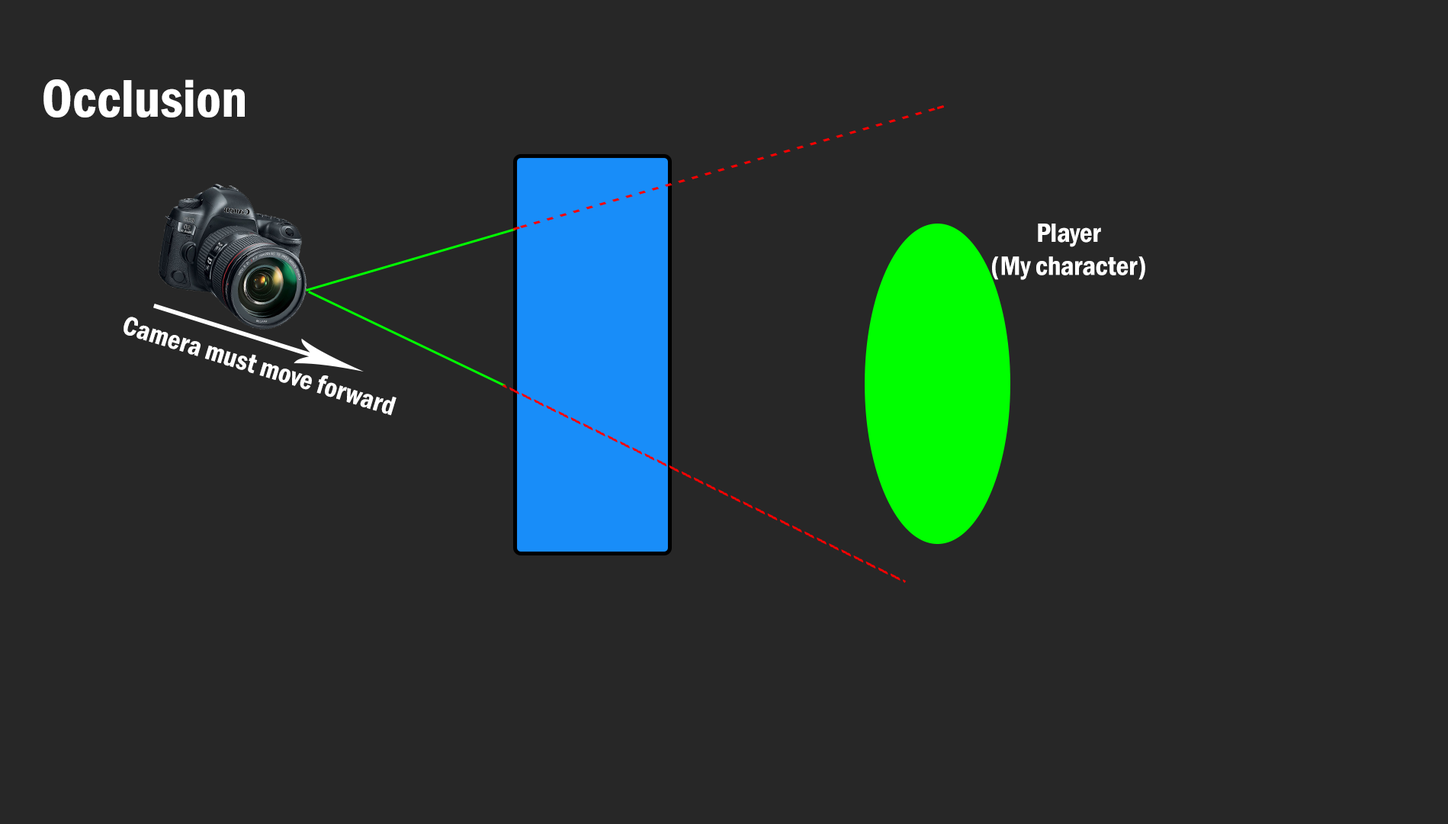
<style>
.page{position:relative;width:1448px;height:824px;background:#272727}
.page>*{position:absolute;margin:0}
.t1{font:54.9px "FranklinGothic-DemiCond";color:#ffffff}
.t2{font:27.5px "FranklinGothic-DemiCond";color:#ffffff}
</style>
<div class="page">
<p class="t1" style="left:43px;top:79px;width:202px;height:38px">Occlusion</p>
<p class="t2" style="left:992px;top:223px;width:153px;height:57px;text-align:center">Player<br>(My character)</p>
<p class="t2" style="left:124px;top:316px;width:273px;height:100px;rotate:17deg">Camera must move forward</p>
</div>
